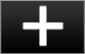
<style>
.page{position:relative;width:85px;height:54px}
.page>*{position:absolute;margin:0}
.t1{font:80px "Gotham-Book";color:#ffffff}
</style>
<div class="page">
<p class="t1" style="left:23px;top:6px;width:40px;height:40px">+</p>
</div>
